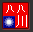
<style>
.page{position:relative;width:33px;height:32px;background:#f20000}
.page>*{position:absolute;margin:0}
.t1{font:10.4px "SimSun";color:#ffffff}
.t2{font:11.7px "SimSun";color:#ffffff}
</style>
<div class="page">
<p class="t1" style="left:6px;top:5px;width:19px;height:8px">八八</p>
<p class="t2" style="left:16px;top:15px;width:11px;height:12px">川</p>
</div>
